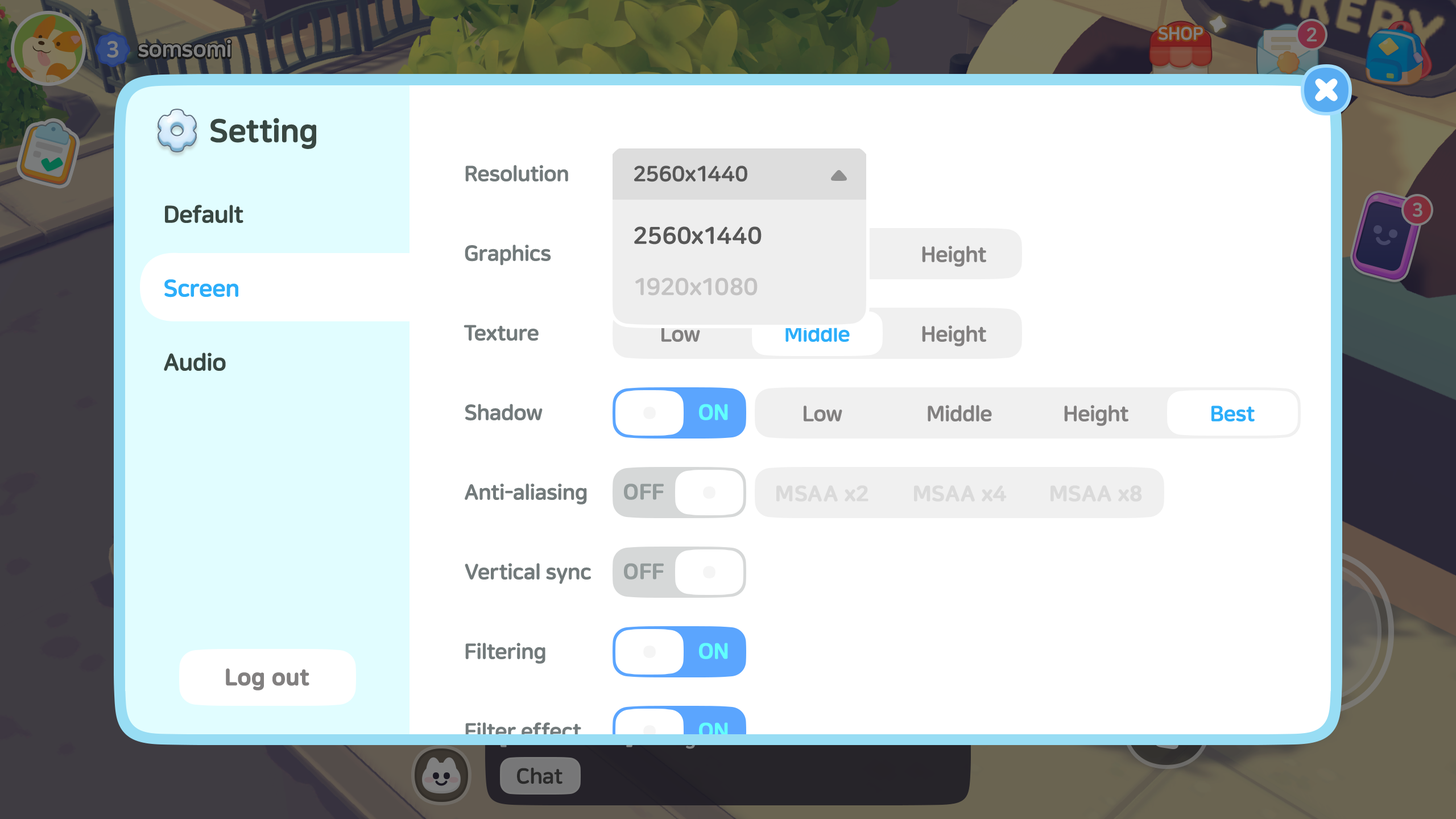
<style>
.page{position:relative;width:1456px;height:819px;background:#ffffff}
.page>*{position:absolute;margin:0}
.t1{font:31.8px "NanumSquareRoundEB";letter-spacing:-0.02em;color:#384742;font-weight:bold}
.t2{font:21.6px "NanumSquareRoundEB";letter-spacing:-0.02em;color:#727a7b}
.t3{font:21.6px "NanumSquareRoundEB";letter-spacing:-0.01em;color:#575757}
.t4{font:23.9px "NanumSquareRoundEB";letter-spacing:-0.02em;color:#384742}
.t5{font:23.9px "NanumSquareRoundEB";color:#575757}
.t6{font:21.6px "NanumSquareRoundEB";letter-spacing:-0.02em;color:#828080}
.t7{font:23.9px "NanumSquareRoundEB";letter-spacing:-0.02em;color:#2caefa}
.t8{font:23.9px "NanumSquareRoundEB";color:#c3c2c2}
.t9{font:21.6px "NanumSquareRoundEB";letter-spacing:-0.02em;color:#2caefa}
.t10{font:21.6px "NanumSquareRoundEB";letter-spacing:-0.01em;color:#62fffd;text-transform:uppercase;font-weight:bold}
.t11{font:21.6px "NanumSquareRoundEB";letter-spacing:-0.01em;color:#939b9b;text-transform:uppercase;font-weight:bold}
.t12{font:21.6px "NanumSquareRoundEB";letter-spacing:-0.01em;color:#dadada;font-weight:bold}
.t13{font:22.7px "NanumSquareRoundEB";letter-spacing:-0.01em;color:#828080;font-weight:bold}
</style>
<div class="page">
<p class="t1" style="left:210px;top:118px;width:106px;height:31px">Setting</p>
<p class="t2" style="left:465px;top:165px;width:103px;height:16px">Resolution</p>
<p class="t3" style="left:634px;top:166px;width:113px;height:16px">2560x1440</p>
<p class="t4" style="left:165px;top:205px;width:78px;height:18px">Default</p>
<p class="t5" style="left:634px;top:226px;width:128px;height:19px">2560x1440</p>
<p class="t2" style="left:465px;top:245px;width:86px;height:21px">Graphics</p>
<p class="t6" style="left:922px;top:246px;width:64px;height:21px">Height</p>
<p class="t7" style="left:164px;top:279px;width:74px;height:18px">Screen</p>
<p class="t8" style="left:635px;top:278px;width:123px;height:18px">1920x1080</p>
<p class="t2" style="left:464px;top:325px;width:75px;height:16px">Texture</p>
<p class="t6" style="left:661px;top:326px;width:39px;height:16px">Low</p>
<p class="t9" style="left:785px;top:325px;width:65px;height:17px">Middle</p>
<p class="t6" style="left:922px;top:325px;width:64px;height:21px">Height</p>
<p class="t4" style="left:164px;top:353px;width:62px;height:18px">Audio</p>
<p class="t2" style="left:465px;top:404px;width:78px;height:17px">Shadow</p>
<p class="t10" style="left:699px;top:404px;width:29px;height:16px">ON</p>
<p class="t6" style="left:804px;top:406px;width:38px;height:15px">Low</p>
<p class="t6" style="left:928px;top:405px;width:64px;height:16px">Middle</p>
<p class="t6" style="left:1064px;top:405px;width:64px;height:21px">Height</p>
<p class="t9" style="left:1211px;top:406px;width:44px;height:15px">Best</p>
<p class="t2" style="left:465px;top:483px;width:122px;height:21px">Anti-aliasing</p>
<p class="t11" style="left:624px;top:483px;width:40px;height:17px">off</p>
<p class="t12" style="left:776px;top:485px;width:92px;height:17px">MSAA x2</p>
<p class="t12" style="left:914px;top:485px;width:93px;height:17px">MSAA x4</p>
<p class="t12" style="left:1050px;top:485px;width:92px;height:17px">MSAA x8</p>
<p class="t2" style="left:465px;top:563px;width:126px;height:21px">Vertical sync</p>
<p class="t11" style="left:624px;top:563px;width:40px;height:17px">off</p>
<p class="t2" style="left:465px;top:643px;width:80px;height:21px">Filtering</p>
<p class="t10" style="left:699px;top:643px;width:29px;height:16px">ON</p>
<p class="t13" style="left:226px;top:668px;width:83px;height:22px">Log out</p>
<p class="t2" style="left:465px;top:722px;width:116px;height:17px">Filter effect</p>
<p class="t10" style="left:699px;top:722px;width:29px;height:17px">ON</p>
</div>
